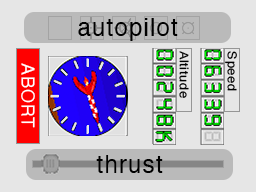
<style>
.page{position:relative;width:256px;height:192px;background:#e6e6e6}
.page>*{position:absolute;margin:0}
.t1{font:24px "Helvetica";letter-spacing:0.05em;color:#000000}
.t2{font:24px "Digital-7Mono";letter-spacing:0.05em}
.t3{font:12px "Helvetica";letter-spacing:0.05em;color:#000000;scale:1.07 1}
.t4{font:18px "Helvetica";letter-spacing:0.05em;color:#ffffff}
.t5{font:24px "Digital-7Mono";letter-spacing:0.05em;color:#c4c4c4}
</style>
<div class="page">
<p class="t1" style="left:78px;top:18px;width:100px;height:23px">autopilot</p>
<p class="t2" style="left:156px;top:50px;width:17px;height:11px;rotate:90deg">8</p>
<p class="t3" style="left:179px;top:51px;width:10px;height:47px;rotate:90deg">Altitude</p>
<p class="t2" style="left:204px;top:50px;width:17px;height:11px;rotate:90deg">8</p>
<p class="t3" style="left:225px;top:51px;width:12px;height:40px;rotate:90deg">Speed</p>
<p class="t4" style="left:21px;top:63px;width:14px;height:65px;rotate:90deg">ABORT</p>
<p class="t2" style="left:156px;top:66px;width:17px;height:11px;rotate:90deg">8</p>
<p class="t2" style="left:204px;top:66px;width:17px;height:11px;rotate:90deg">8</p>
<p class="t2" style="left:156px;top:82px;width:17px;height:11px;rotate:90deg">8</p>
<p class="t2" style="left:204px;top:82px;width:17px;height:11px;rotate:90deg">8</p>
<p class="t2" style="left:156px;top:114px;width:17px;height:11px;rotate:90deg">8</p>
<p class="t2" style="left:204px;top:114px;width:17px;height:11px;rotate:90deg">8</p>
<p class="t5" style="left:204px;top:130px;width:17px;height:11px;rotate:90deg">8</p>
<p class="t1" style="left:96px;top:155px;width:67px;height:18px">thrust</p>
</div>
